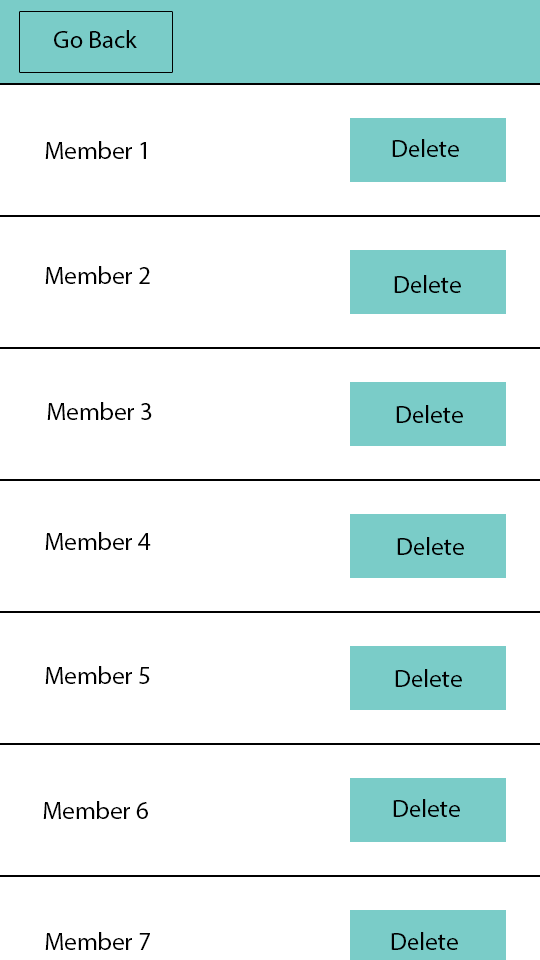
<style>
.page{position:relative;width:540px;height:960px;background:#ffffff}
.page>*{position:absolute;margin:0}
.t1{font:25px "MyriadPro-Regular";color:#000000}
</style>
<div class="page">
<p class="t1" style="left:54px;top:30px;width:83px;height:18px">Go Back</p>
<p class="t1" style="left:45px;top:141px;width:101px;height:18px">Member 1</p>
<p class="t1" style="left:392px;top:139px;width:67px;height:18px">Delete</p>
<p class="t1" style="left:45px;top:266px;width:105px;height:18px">Member 2</p>
<p class="t1" style="left:394px;top:275px;width:67px;height:18px">Delete</p>
<p class="t1" style="left:47px;top:402px;width:105px;height:18px">Member 3</p>
<p class="t1" style="left:396px;top:405px;width:67px;height:18px">Delete</p>
<p class="t1" style="left:45px;top:532px;width:106px;height:18px">Member 4</p>
<p class="t1" style="left:397px;top:537px;width:67px;height:18px">Delete</p>
<p class="t1" style="left:45px;top:666px;width:105px;height:18px">Member 5</p>
<p class="t1" style="left:395px;top:669px;width:67px;height:18px">Delete</p>
<p class="t1" style="left:43px;top:801px;width:105px;height:18px">Member 6</p>
<p class="t1" style="left:393px;top:799px;width:67px;height:18px">Delete</p>
<p class="t1" style="left:45px;top:932px;width:105px;height:18px">Member 7</p>
<p class="t1" style="left:391px;top:932px;width:67px;height:18px">Delete</p>
</div>
